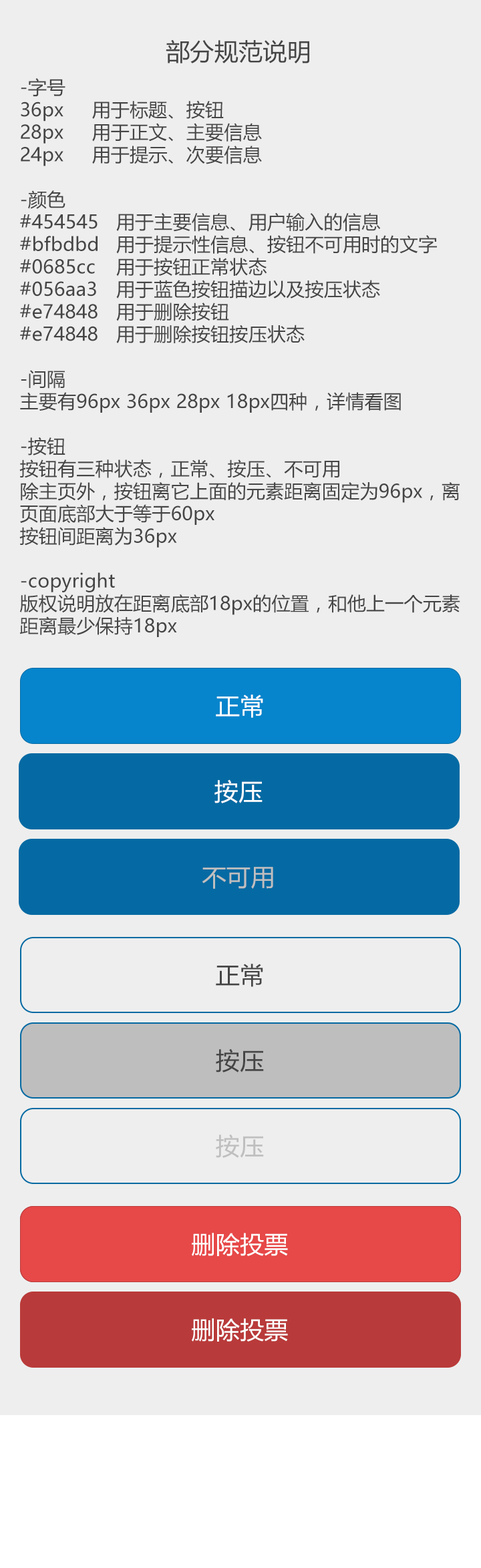
<style>
.page{position:relative;width:481px;height:1568px;background:#eeeeee}
.page>*{position:absolute;margin:0}
.t1{font:24px "MicrosoftYaHeiUI";letter-spacing:0.01em;color:#454545}
.t2{font:18.7px "MicrosoftYaHeiUI";letter-spacing:0.01em;color:#454545}
.t3{font:24px "MicrosoftYaHeiUI";letter-spacing:0.01em;color:#ffffff}
.t4{font:24px "MicrosoftYaHeiUI";letter-spacing:0.01em;color:#bfbfbf}
</style>
<div class="page">
<p class="t1" style="left:166px;top:39px;width:143px;height:24px">部分规范说明</p>
<p class="t2" style="left:19px;top:78px;width:441px;height:559px">-字号<br>36px  用于标题、按钮<br>28px  用于正文、主要信息<br>24px  用于提示、次要信息<br><br>-颜色<br>#454545 用于主要信息、用户输入的信息<br>#bfbdbd 用于提示性信息、按钮不可用时的文字<br>#0685cc 用于按钮正常状态<br>#056aa3 用于蓝色按钮描边以及按压状态<br>#e74848 用于删除按钮<br>#e74848 用于删除按钮按压状态<br><br>-间隔<br>主要有96px 36px 28px 18px四种，详情看图<br><br>-按钮<br>按钮有三种状态，正常、按压、不可用<br>除主页外，按钮离它上面的元素距离固定为96px，离<br>页面底部大于等于60px<br>按钮间距离为36px<br><br>-copyright<br>版权说明放在距离底部18px的位置，和他上一个元素<br>距离最少保持18px</p>
<p class="t3" style="left:216px;top:695px;width:47px;height:23px">正常</p>
<p class="t3" style="left:214px;top:779px;width:48px;height:24px">按压</p>
<p class="t4" style="left:202px;top:867px;width:71px;height:22px">不可用</p>
<p class="t1" style="left:216px;top:964px;width:47px;height:23px">正常</p>
<p class="t1" style="left:216px;top:1048px;width:48px;height:24px">按压</p>
<p class="t4" style="left:216px;top:1134px;width:48px;height:24px">按压</p>
<p class="t3" style="left:192px;top:1233px;width:96px;height:23px">删除投票</p>
<p class="t3" style="left:192px;top:1233px;width:96px;height:23px">删除投票</p>
<p class="t3" style="left:192px;top:1318px;width:96px;height:24px">删除投票</p>
</div>
